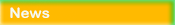
<style>
.page{position:relative;width:175px;height:25px;background:#ffba00}
.page>*{position:absolute;margin:0}
.t1{font:14.2px "ArialRoundedMTBold";color:#f4fcf4;scale:1.07 1}
</style>
<div class="page">
<p class="t1" style="left:10px;top:7px;width:40px;height:11px">News</p>
</div>
